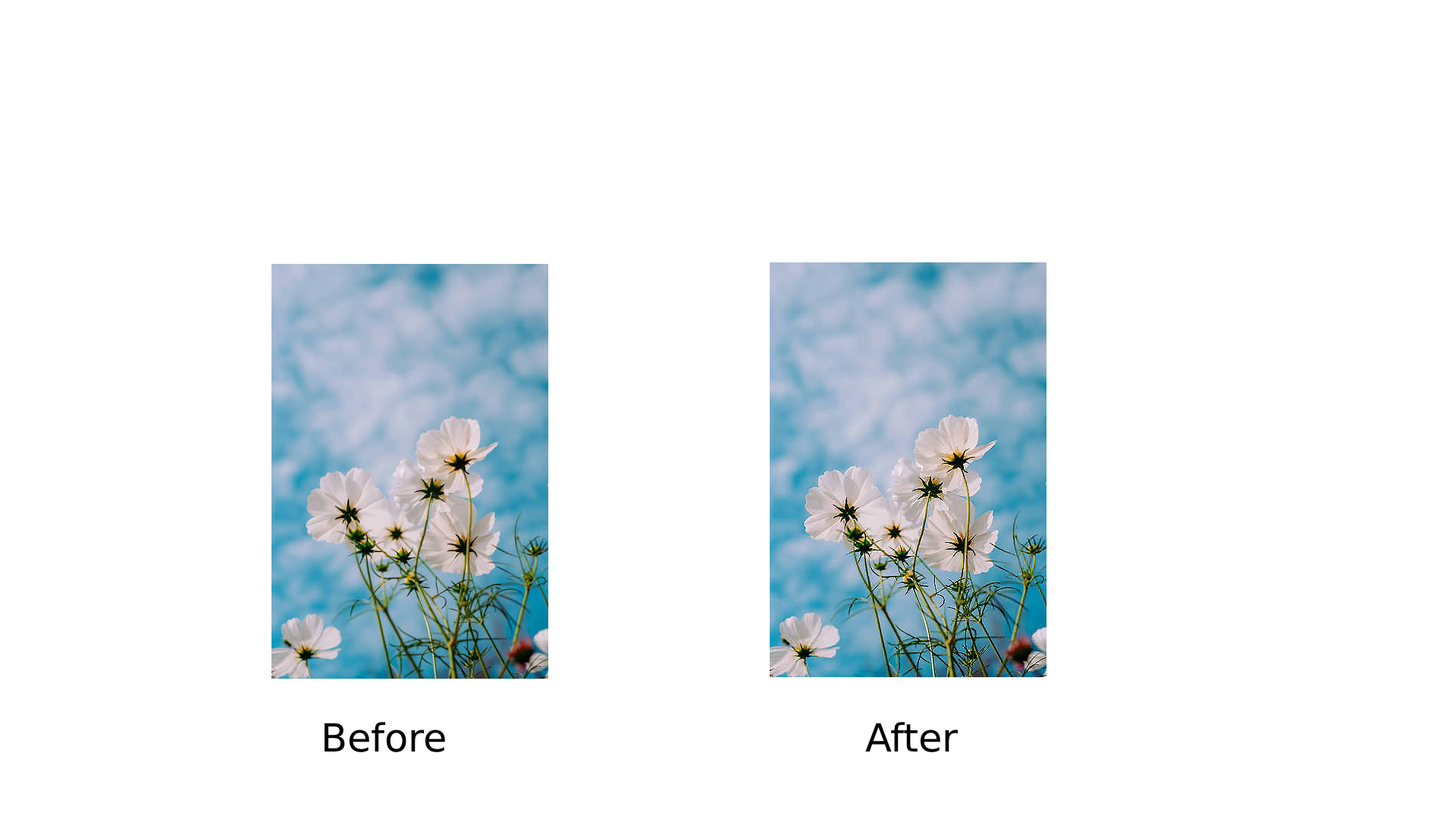
<style>
.page{position:relative;width:1456px;height:819px;background:#ffffff}
.page>*{position:absolute;margin:0}
.t1{font:38.7px "DejaVuSans";color:#000000}
</style>
<div class="page">
<p class="t1" style="left:325px;top:722px;width:633px;height:30px">Before                                  After</p>
</div>
